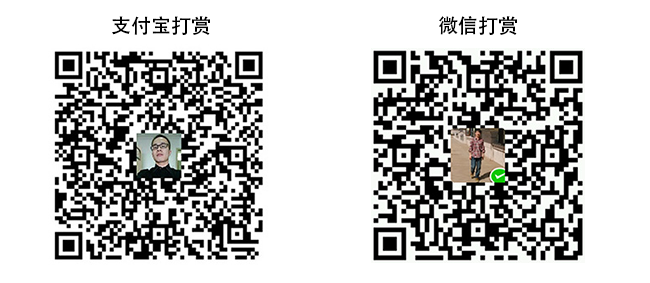
<style>
.page{position:relative;width:650px;height:283px;background:#ffffff}
.page>*{position:absolute;margin:0}
.t1{font:20px "AdobeHeitiStd-Regular";color:#000000}
</style>
<div class="page">
<p class="t1" style="left:112px;top:16px;width:98px;height:19px">支付宝打赏</p>
<p class="t1" style="left:439px;top:16px;width:78px;height:19px">微信打赏</p>
</div>
